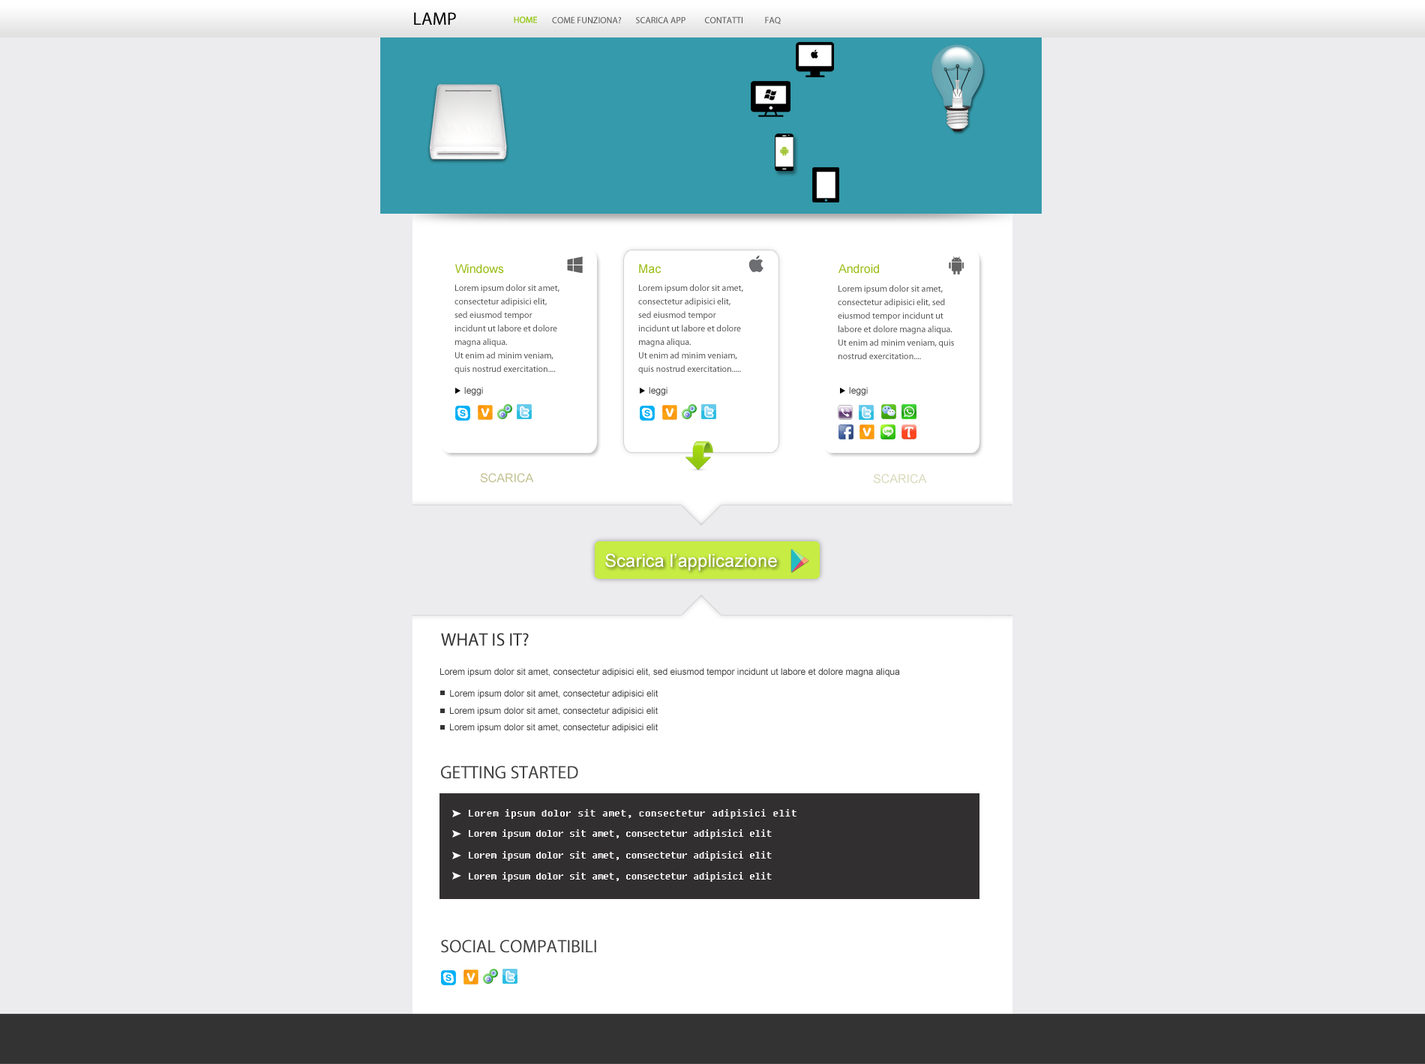
<style>
.page{position:relative;width:1425px;height:1064px;background:#ececef}
.page>*{position:absolute;margin:0}
.t1{font:18px "MyriadPro-Regular";color:#000000;text-transform:uppercase}
.t2{font:9px "Myriad-Roman";color:#92c611;text-transform:uppercase}
.t3{font:9px "MyriadPro-Regular";color:#4e4e4e;text-transform:uppercase}
.t4{font:9px "MyriadPro-Regular";color:#4e4e4e}
.t5{font:12px "ArialMT";color:#9abe19}
.t6{font:9px/13.5px "MyriadPro-Regular";color:#515050}
.t7{font:9px "ArialMT";color:#434343}
.t8{font:12px "ArialMT";color:#bfbf8e;text-transform:uppercase}
.t9{font:12px "ArialMT";color:#d8d8ba;text-transform:uppercase}
.t10{font:18px "ArialMT";color:#ffffff}
.t11{font:18px "MyriadPro-Regular";color:#333333;text-transform:uppercase}
.t12{font:9px "ArialMT";color:#414141}
.t13{font:18px "MyriadPro-Regular";color:#414141;text-transform:uppercase}
.t14{font:9.8px "Fixedsys";color:#f4f4f4}
.t15{font:9px "Fixedsys";color:#f4f4f4}
</style>
<div class="page">
<p class="t1" style="left:414px;top:12px;width:42px;height:13px">Lamp</p>
<p class="t2" style="left:514px;top:16px;width:23px;height:7px">Home</p>
<p class="t3" style="left:552px;top:16px;width:69px;height:7px">Come funziona?</p>
<p class="t3" style="left:636px;top:16px;width:50px;height:7px">Scarica app</p>
<p class="t3" style="left:705px;top:16px;width:37px;height:7px">Contatti</p>
<p class="t4" style="left:765px;top:16px;width:16px;height:8px">FAQ</p>
<p class="t5" style="left:455px;top:264px;width:49px;height:10px">Windows</p>
<p class="t5" style="left:639px;top:264px;width:23px;height:10px">Mac</p>
<p class="t5" style="left:838px;top:264px;width:41px;height:10px">Android</p>
<p class="t6" style="left:454px;top:284px;width:106px;height:90px">Lorem ipsum dolor sit amet, <br>consectetur adipisici elit, <br>sed eiusmod tempor <br>incidunt ut labore et dolore <br>magna aliqua. <br>Ut enim ad minim veniam, <br>quis nostrud exercitation....</p>
<p class="t6" style="left:638px;top:284px;width:105px;height:90px">Lorem ipsum dolor sit amet, <br>consectetur adipisici elit, <br>sed eiusmod tempor <br>incidunt ut labore et dolore <br>magna aliqua. <br>Ut enim ad minim veniam, <br>quis nostrud exercitation.....</p>
<p class="t6" style="left:838px;top:285px;width:116px;height:74px">Lorem ipsum dolor sit amet, <br>consectetur adipisici elit, sed <br>eiusmod tempor incidunt ut <br>labore et dolore magna aliqua. <br>Ut enim ad minim veniam, quis <br>nostrud exercitation....</p>
<p class="t7" style="left:464px;top:387px;width:19px;height:9px">leggi</p>
<p class="t7" style="left:649px;top:387px;width:19px;height:9px">leggi</p>
<p class="t7" style="left:849px;top:387px;width:19px;height:9px">leggi</p>
<p class="t8" style="left:480px;top:473px;width:54px;height:10px">scarica</p>
<p class="t9" style="left:873px;top:474px;width:54px;height:10px">scarica</p>
<p class="t10" style="left:605px;top:554px;width:172px;height:17px">Scarica l’applicazione</p>
<p class="t11" style="left:441px;top:633px;width:88px;height:13px">What is it?</p>
<p class="t12" style="left:440px;top:668px;width:460px;height:31px">Lorem ipsum dolor sit amet, consectetur adipisici elit, sed eiusmod tempor incidunt ut labore et dolore magna aliqua<br><br>    Lorem ipsum dolor sit amet, consectetur adipisici elit</p>
<p class="t12" style="left:450px;top:707px;width:208px;height:9px">Lorem ipsum dolor sit amet, consectetur adipisici elit</p>
<p class="t12" style="left:450px;top:724px;width:208px;height:9px">Lorem ipsum dolor sit amet, consectetur adipisici elit</p>
<p class="t13" style="left:441px;top:766px;width:137px;height:13px">Getting started</p>
<p class="t14" style="left:469px;top:809px;width:327px;height:10px">Lorem ipsum dolor sit amet, consectetur adipisici elit</p>
<p class="t15" style="left:469px;top:830px;width:303px;height:9px">Lorem ipsum dolor sit amet, consectetur adipisici elit</p>
<p class="t15" style="left:469px;top:851px;width:303px;height:10px">Lorem ipsum dolor sit amet, consectetur adipisici elit</p>
<p class="t15" style="left:469px;top:872px;width:303px;height:10px">Lorem ipsum dolor sit amet, consectetur adipisici elit</p>
<p class="t13" style="left:441px;top:940px;width:155px;height:13px">social compatibili</p>
</div>
